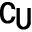
<style>
.page{position:relative;width:32px;height:32px;background:#ffffff}
.page>*{position:absolute;margin:0}
.t1{font:29.2px "RobotoMono-Regular";color:#000000;font-weight:bold}
</style>
<div class="page">
<p class="t1" style="left:0px;top:2px;width:16px;height:22px">C</p>
<p class="t1" style="left:16px;top:8px;width:15px;height:22px">U</p>
</div>
